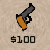
<style>
.page{position:relative;width:50px;height:50px}
.page>*{position:absolute;margin:0}
.t1{font:9px "OCRAStd";color:#121109}
</style>
<div class="page">
<p class="t1" style="left:10px;top:36px;width:26px;height:7px">$100</p>
</div>
